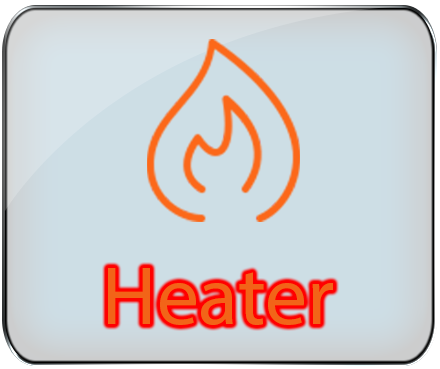
<style>
.page{position:relative;width:440px;height:369px;background:#cddee5}
.page>*{position:absolute;margin:0}
.t1{font:83.2px "MyriadPro-Regular";color:#f26418}
</style>
<div class="page">
<p class="t1" style="left:108px;top:268px;width:225px;height:57px">Heater</p>
</div>
